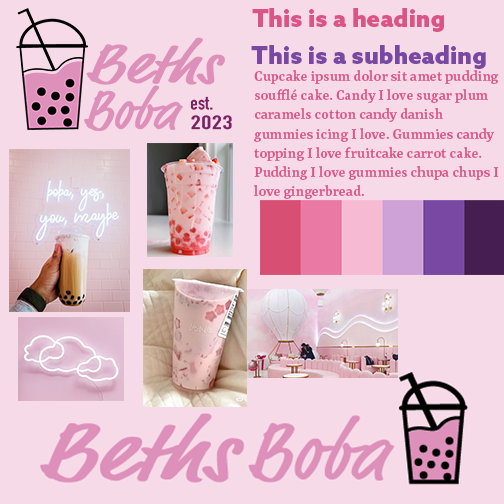
<style>
.page{position:relative;width:504px;height:504px;background:#f7dae8}
.page>*{position:absolute;margin:0}
.t1{font:24px "AzoSans-Black";color:#db5486}
.t2{font:24px "AzoSans-Black";color:#7948a2}
.t3{font:16px "Rasa-SemiBold";color:#db5486}
</style>
<div class="page">
<p class="t1" style="left:252px;top:8px;width:192px;height:24px">This is a heading</p>
<p class="t2" style="left:251px;top:45px;width:235px;height:24px">This is a subheading</p>
<p class="t3" style="left:254px;top:70px;width:245px;height:129px">Cupcake ipsum dolor sit amet pudding soufflé cake. Candy I love sugar plum caramels cotton candy danish gummies icing I love. Gummies candy topping I love fruitcake carrot cake. Pudding I love gummies chupa chups I love gingerbread.</p>
</div>
